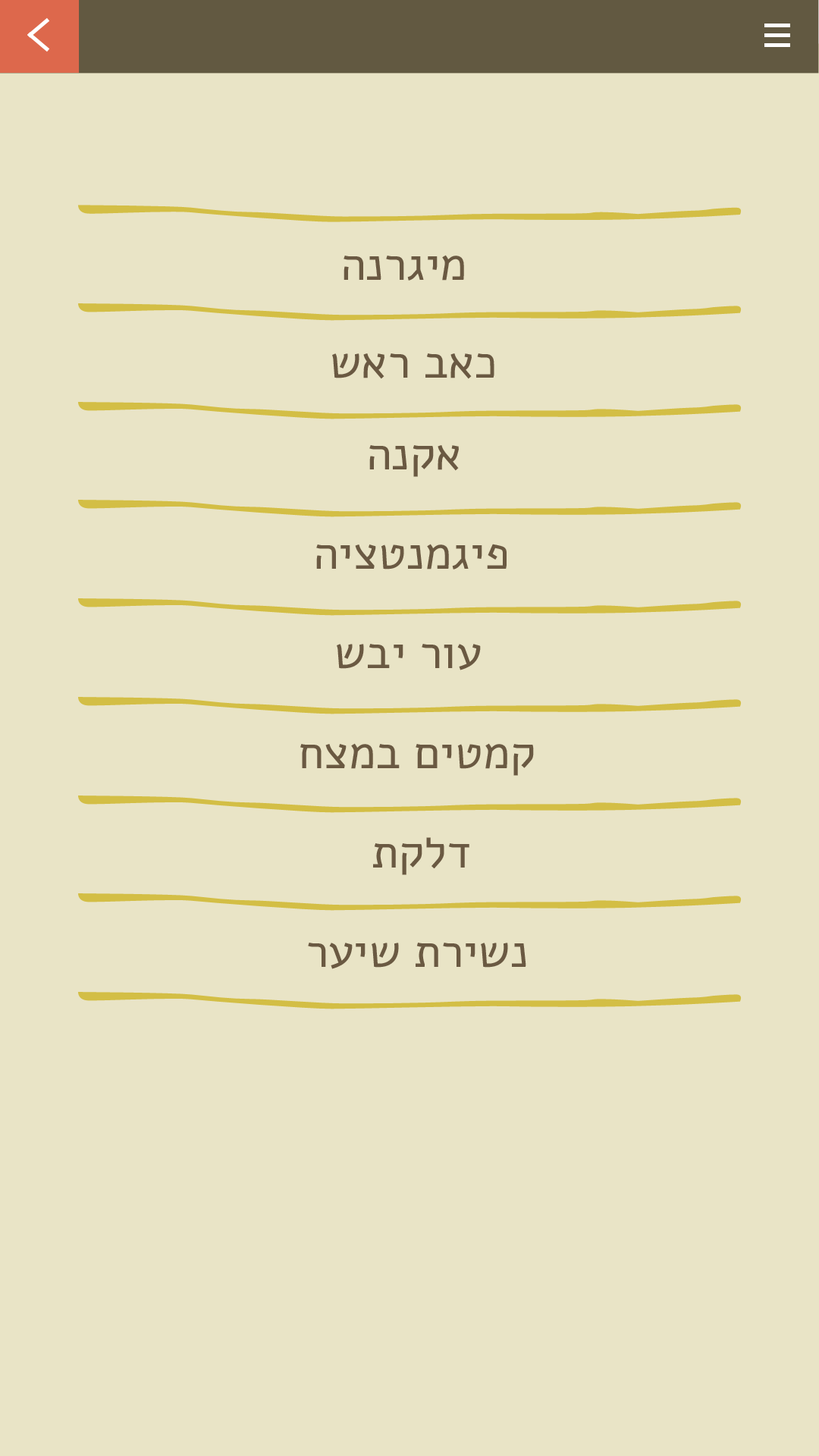
<style>
.page{position:relative;width:819px;height:1456px;background:#e9e4c6}
.page>*{position:absolute;margin:0}
.t1{font:46.2px "Alef-Regular";color:#6a5942}
</style>
<div class="page">
<p class="t1" style="left:344px;top:255px;width:120px;height:26px">הנרגימ</p>
<p class="t1" style="left:332px;top:353px;width:162px;height:26px">שאר באכ</p>
<p class="t1" style="left:369px;top:445px;width:90px;height:32px">הנקא</p>
<p class="t1" style="left:316px;top:544px;width:191px;height:26px">היצטנמגיפ</p>
<p class="t1" style="left:337px;top:644px;width:144px;height:26px">שבי רוע</p>
<p class="t1" style="left:300px;top:743px;width:234px;height:33px">חצמב םיטמק</p>
<p class="t1" style="left:373px;top:837px;width:96px;height:38px">תקלד</p>
<p class="t1" style="left:308px;top:943px;width:218px;height:26px">רעיש תרישנ</p>
</div>
